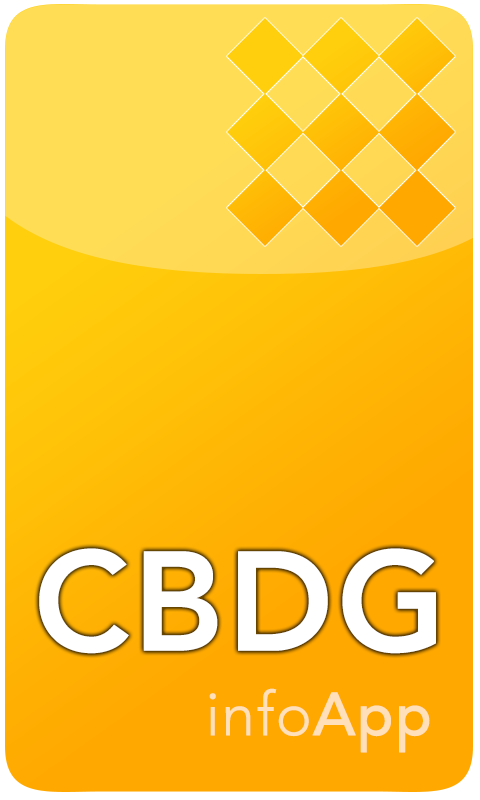
<style>
.page{position:relative;width:480px;height:800px}
.page>*{position:absolute;margin:0}
.t1{font:140px "Avenir-Heavy";color:#ffffff;font-weight:bold}
.t2{font:60px "Avenir-Light";color:#ffe0ba;font-weight:bold}
.t3{font:60px "Avenir-Medium";color:#ffe0ba;font-weight:bold}
</style>
<div class="page">
<p class="t1" style="left:39px;top:548px;width:397px;height:106px">CBDG</p>
<p class="t2" style="left:209px;top:688px;width:221px;height:65px">info<span class="t3">App</span></p>
</div>
